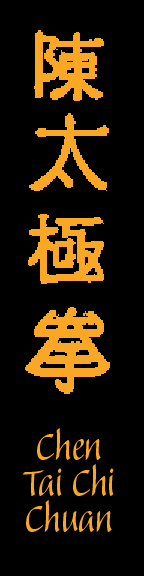
<style>
.page{position:relative;width:144px;height:576px;background:#000000}
.page>*{position:absolute;margin:0}
.t1{font:48px/36px "Balzano";color:#faa725}
</style>
<div class="page">
<p class="t1" style="left:22px;top:428px;width:92px;height:104px;text-align:center">Chen<br>Tai Chi<br>Chuan</p>
</div>
